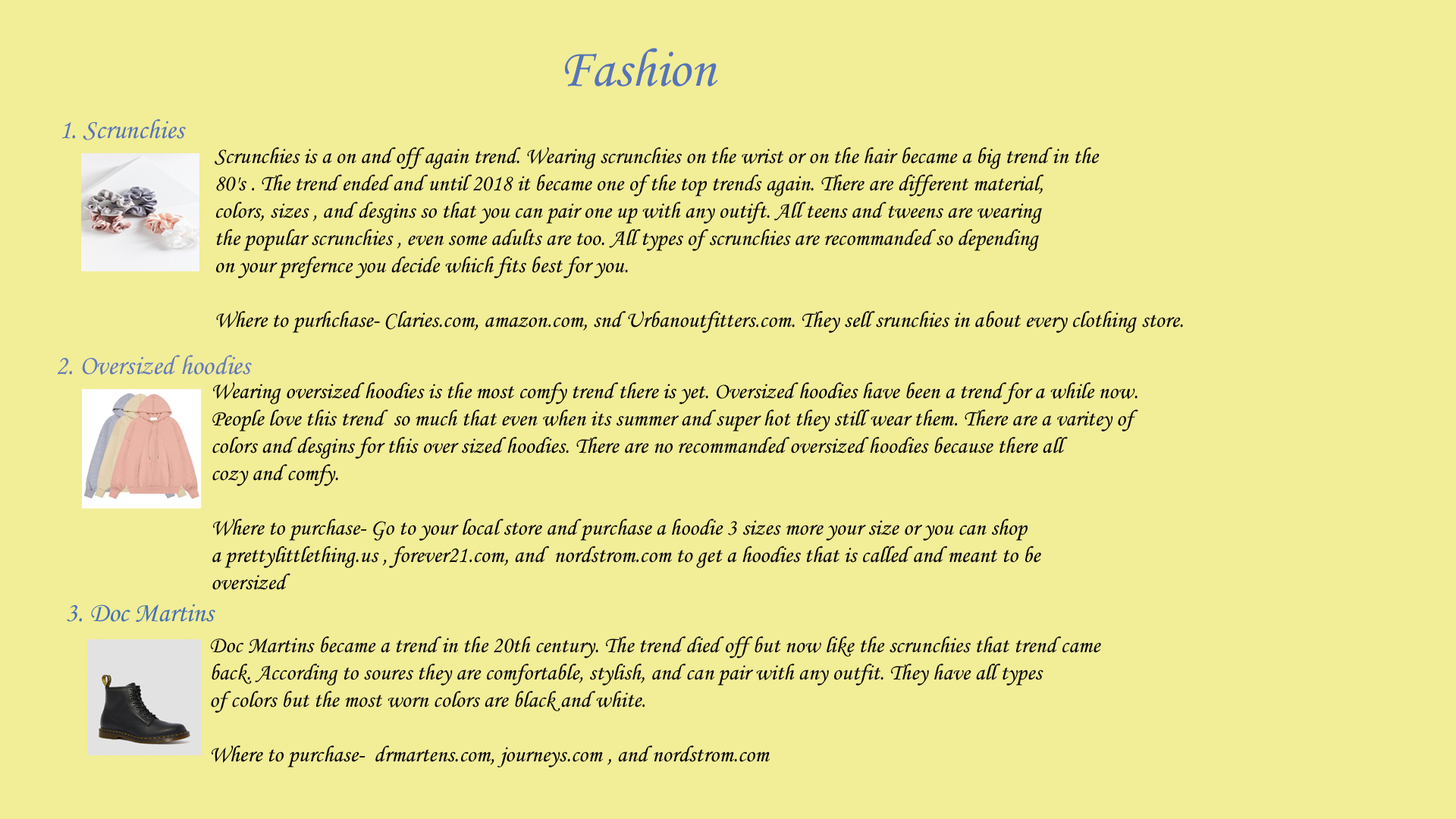
<style>
.page{position:relative;width:1456px;height:819px;background:#f2ed97}
.page>*{position:absolute;margin:0}
.t1{font:54.6px "MonotypeCorsiva";color:#5674b9}
.t2{font:27.3px "MonotypeCorsiva";color:#5674b9}
.t3{font:22.7px "MonotypeCorsiva";color:#030303}
.t4{font:27.3px "MonotypeCorsiva";color:#647abc}
.t5{font:22.7px "MonotypeCorsiva";color:#000000}
.t6{font:27.3px "MonotypeCorsiva";color:#4572b6}
.t7{font:22.7px "MonotypeCorsiva";color:#060606}
.t8{font:22.7px "MonotypeCorsiva";color:#020202}
</style>
<div class="page">
<p class="t1" style="left:565px;top:48px;width:153px;height:38px">Fashion</p>
<p class="t2" style="left:61px;top:119px;width:125px;height:21px">1. Scrunchies</p>
<p class="t3" style="left:215px;top:147px;width:968px;height:186px">Scrunchies is a on and off again trend. Wearing scrunchies on the wrist or on the hair became a big trend in the<br>80's . The trend ended and until 2018 it became one of the top trends again. There are different material, <br>colors, sizes , and desgins so that you can pair one up with any outift. All teens and tweens are wearing<br>the popular scrunchies , even some adults are too. All types of scrunchies are recommanded so depending<br>on your prefernce you decide which fits best for you. <br><br>Where to purhchase- Claries.com, amazon.com, snd Urbanoutfitters.com. They sell srunchies in about every clothing store.</p>
<p class="t4" style="left:57px;top:355px;width:195px;height:20px">2. Oversized hoodies</p>
<p class="t5" style="left:212px;top:382px;width:926px;height:208px">Wearing oversized hoodies is the most comfy trend there is yet. Oversized hoodies have been a trend for a while now.<br>People love this trend  so much that even when its summer and super hot they still wear them. There are a varitey of<br>colors and desgins for this over sized hoodies. There are no recommanded oversized hoodies because there all<br>cozy and comfy. <br><br>Where to purchase- Go to your local store and purchase a hoodie 3 sizes more your size or you can shop<br>a prettylittlething.us , forever21.com, and  nordstrom.com to get a hoodies that is called and meant to be <br>oversized</p>
<p class="t6" style="left:67px;top:604px;width:148px;height:18px">3. Doc Martins</p>
<p class="t7" style="left:211px;top:636px;width:890px;height:131px">Doc Martins became a trend in the 20th century. The trend died off but now like the scrunchies that trend came<br>back. According to soures they are comfortable, stylish, and can pair with any outfit. They have all types<br>of colors but the most worn colors are black and white. <br><br><span class="t8">Where to purchase-  drmartens.com, journeys.com , and nordstrom.com</span></p>
</div>
